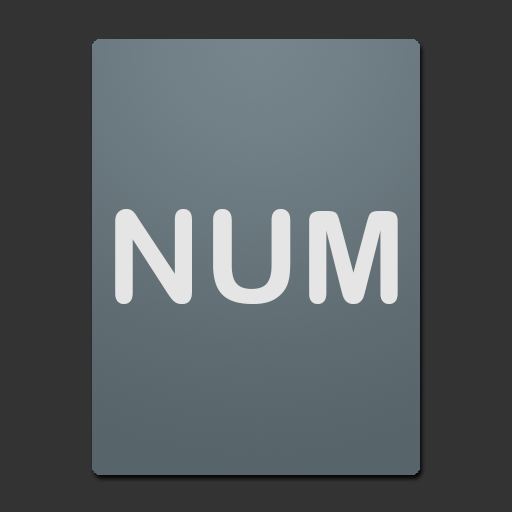
<style>
.page{position:relative;width:512px;height:512px;background:#333333}
.page>*{position:absolute;margin:0}
.t1{font:128px "ArialRoundedMTBold";color:#e5e5e5}
</style>
<div class="page">
<p class="t1" style="left:115px;top:209px;width:283px;height:95px">NUM</p>
</div>
